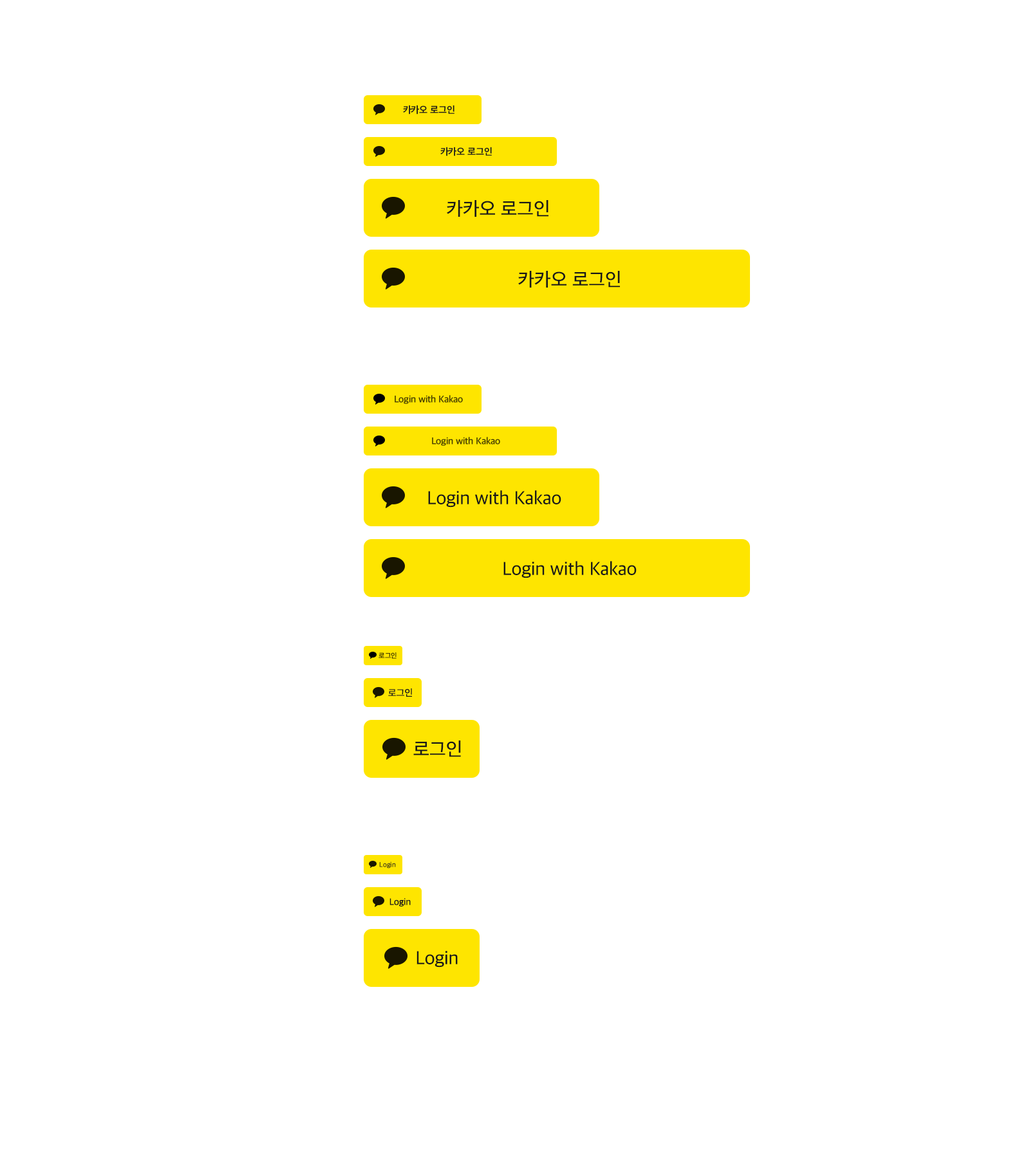
<style>
.page{position:relative;width:1030px;height:1158px;background:#ffffff}
.page>*{position:absolute;margin:0}
.t1{font:9.7px "AppleSDGothicNeo-SemiBold";color:#191919}
.t2{font:19.3px "AppleSDGothicNeo-Medium";letter-spacing:-0.01em;color:#191919}
.t3{font:9.7px "AppleSDGothicNeo-SemiBold";letter-spacing:-0.01em;color:#473f00}
.t4{font:7.1px "AppleSDGothicNeo-Medium";letter-spacing:-0.01em;color:#473f00}
.t5{font:9.7px "AppleSDGothicNeo-Medium";letter-spacing:-0.01em;color:#191919}
.t6{font:7.1px "AppleSDGothicNeo-Medium";color:#524b15}
</style>
<div class="page">
<p class="t1" style="left:403px;top:105px;width:51px;height:10px">카카오 로그인</p>
<p class="t1" style="left:440px;top:147px;width:52px;height:9px">카카오 로그인</p>
<p class="t2" style="left:447px;top:200px;width:101px;height:17px">카카오 로그인</p>
<p class="t2" style="left:518px;top:271px;width:102px;height:17px">카카오 로그인</p>
<p class="t3" style="left:394px;top:395px;width:69px;height:9px">Login with Kakao</p>
<p class="t3" style="left:432px;top:437px;width:68px;height:9px">Login with Kakao</p>
<p class="t2" style="left:428px;top:490px;width:133px;height:18px">Login with Kakao</p>
<p class="t2" style="left:503px;top:561px;width:133px;height:17px">Login with Kakao</p>
<p class="t4" style="left:378px;top:652px;width:18px;height:7px">로그인</p>
<p class="t5" style="left:388px;top:689px;width:24px;height:8px">로그인</p>
<p class="t2" style="left:413px;top:741px;width:48px;height:16px">로그인</p>
<p class="t6" style="left:379px;top:862px;width:17px;height:7px">Login</p>
<p class="t5" style="left:389px;top:898px;width:22px;height:9px">Login</p>
<p class="t2" style="left:416px;top:951px;width:41px;height:17px">Login</p>
</div>
